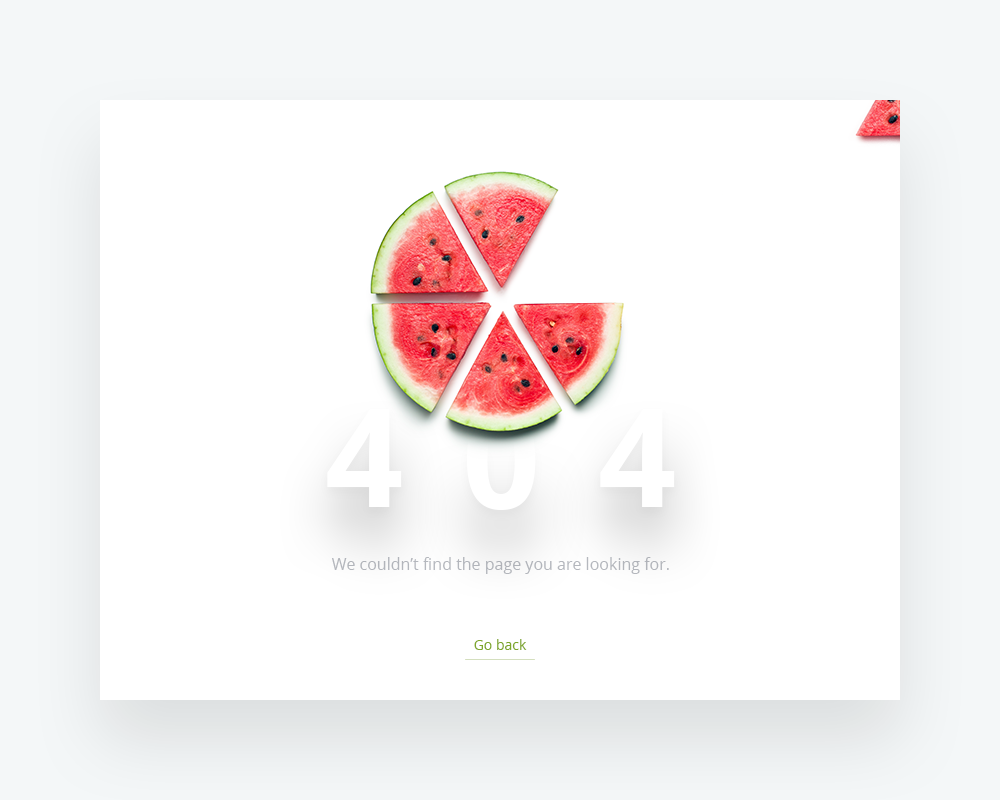
<style>
.page{position:relative;width:1000px;height:800px;background:#ffffff}
.page>*{position:absolute;margin:0}
.t1{font:136.6px "OpenSans-Bold";letter-spacing:0.025em;color:#ffffff}
.t2{font:16px "OpenSans";color:#b6b9bf}
.t3{font:14px "OpenSans";color:#7fa72c}
</style>
<div class="page">
<p class="t1" style="left:327px;top:409px;width:75px;height:98px">4</p>
<p class="t1" style="left:600px;top:409px;width:75px;height:98px">4</p>
<p class="t2" style="left:332px;top:557px;width:337px;height:17px">We couldn’t find the page you are looking for.</p>
<p class="t3" style="left:474px;top:639px;width:53px;height:11px">Go back</p>
</div>
